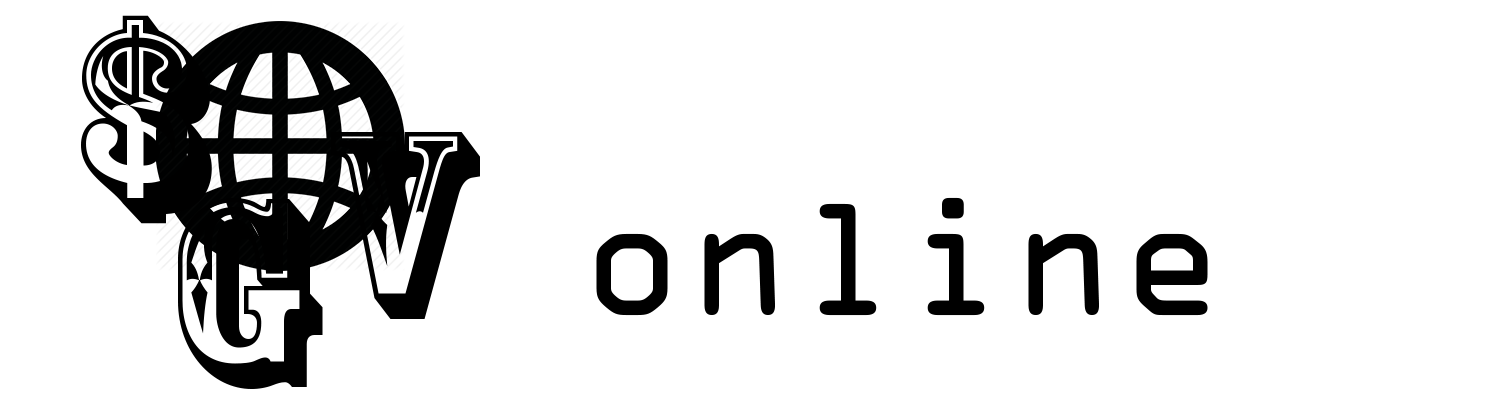
<style>
.page{position:relative;width:1500px;height:400px;background:#ffffff}
.page>*{position:absolute;margin:0}
.t1{font:250px "RosewoodStd-Regular";color:#000000}
.t2{font:150px "OCRAStd";color:#000000}
</style>
<div class="page">
<p class="t1" style="left:81px;top:15px;width:131px;height:209px">$</p>
<p class="t1" style="left:331px;top:132px;width:149px;height:187px">v</p>
<p class="t1" style="left:178px;top:198px;width:145px;height:191px">g</p>
<p class="t2" style="left:596px;top:197px;width:612px;height:119px">online</p>
</div>
